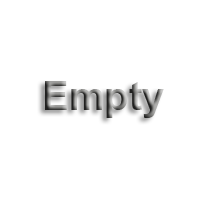
<style>
.page{position:relative;width:200px;height:200px;background:#ffffff}
.page>*{position:absolute;margin:0}
.t1{font:40px "Arial-BoldMT"}
</style>
<div class="page">
<p class="t1" style="left:45px;top:81px;width:119px;height:37px">Empty</p>
</div>
